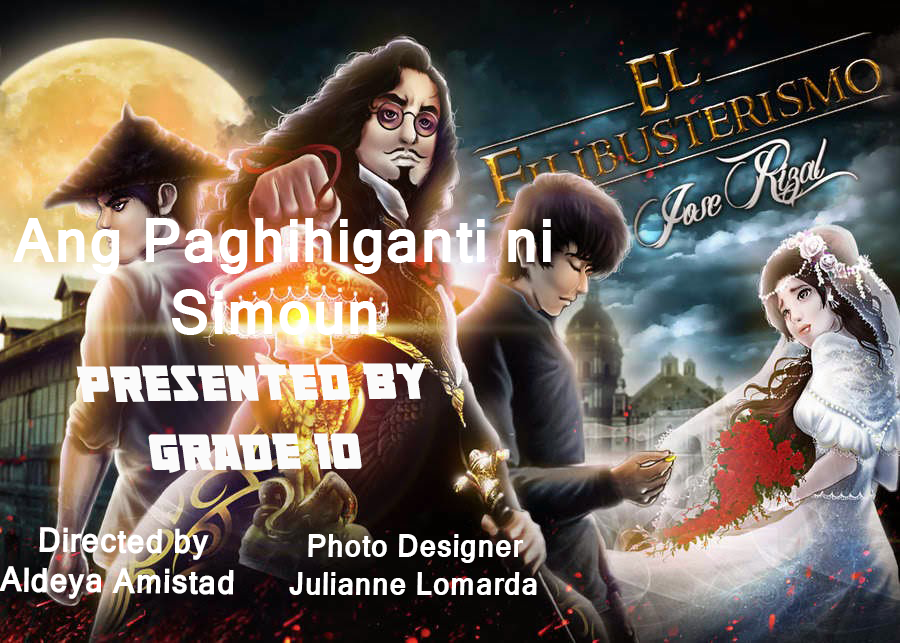
<style>
.page{position:relative;width:900px;height:643px}
.page>*{position:absolute;margin:0}
.t1{font:60px "Kartika-Bold";color:#ffffff;scale:0.97 1}
.t2{font:58.1px "LibertyLegion";color:#fbfbfb;scale:0.9 1}
.t3{font:33.6px "Kartika-Bold";color:#ffffff;scale:0.94 1}
.t4{font:31.2px "Kartika-Bold";color:#ffffff;scale:0.93 1}
</style>
<div class="page">
<p class="t1" style="left:13px;top:218px;width:538px;height:117px;text-align:center">Ang Paghihiganti ni<br> Simoun</p>
<p class="t2" style="left:76px;top:363px;width:350px;height:110px;text-align:center">Presented by <br>Grade 10</p>
<p class="t3" style="left:0px;top:527px;width:234px;height:72px;text-align:center;rotate:1deg">Directed by <br>Aldeya Amistad</p>
<p class="t4" style="left:289px;top:534px;width:248px;height:61px;text-align:center">Photo Designer<br>Julianne Lomarda</p>
</div>
